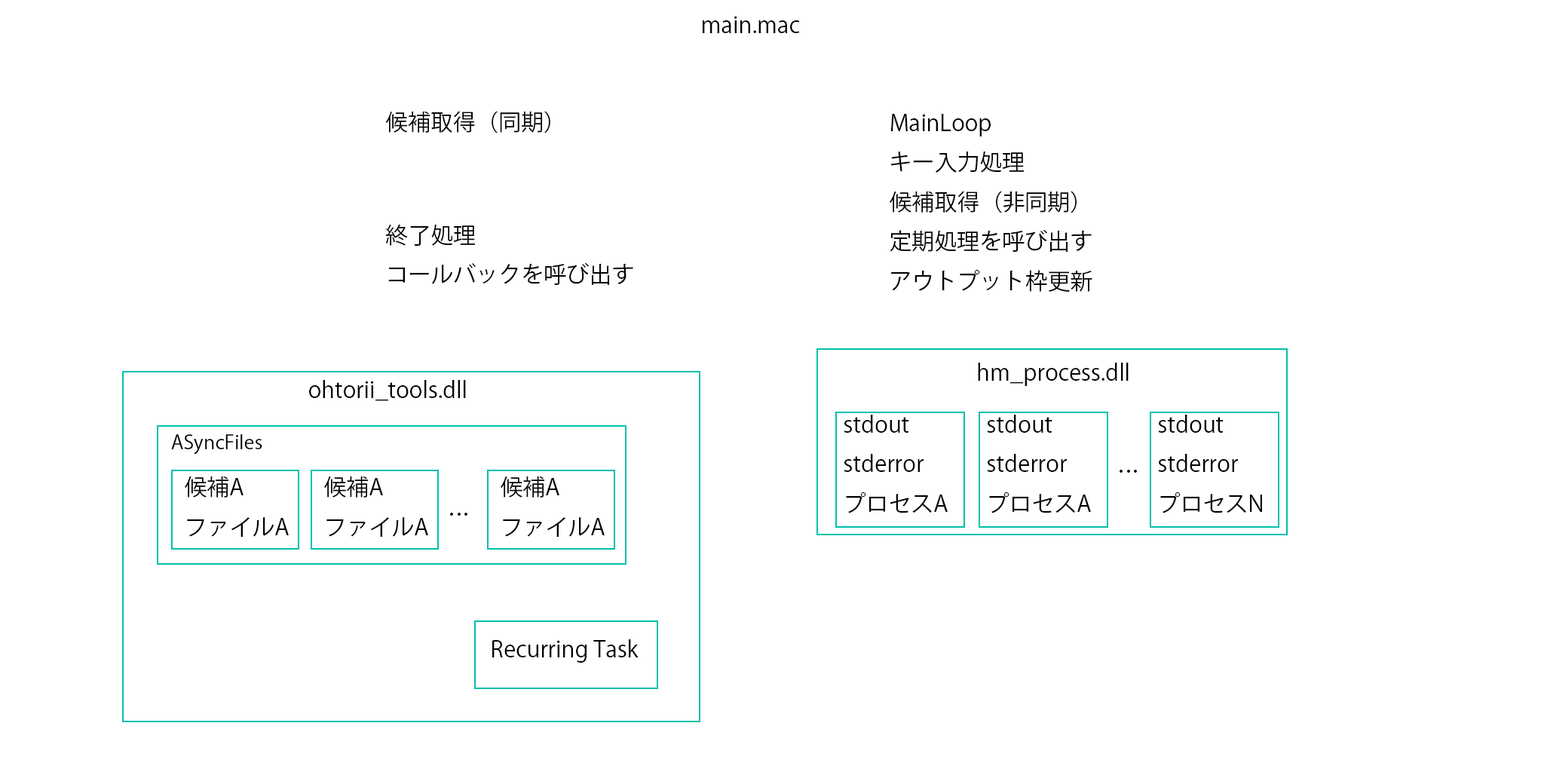
<style>
.page{position:relative;width:1544px;height:772px;background:#ffffff}
.page>*{position:absolute;margin:0}
.t1{font:22.6px "KozGoPr6N-Regular";color:#000000}
.t2{font:19.3px "KozGoPr6N-Regular";color:#000000}
</style>
<div class="page">
<p class="t1" style="left:703px;top:16px;width:97px;height:17px">main.mac</p>
<p class="t1" style="left:385px;top:111px;width:165px;height:22px">候補取得（同期）</p>
<p class="t1" style="left:890px;top:114px;width:203px;height:178px">MainLoop<br>キー入力処理<br>候補取得（非同期）<br>定期処理を呼び出す<br>アウトプット枠更新</p>
<p class="t1" style="left:386px;top:224px;width:247px;height:61px">終了処理<br>コールバックを呼び出す</p>
<p class="t1" style="left:978px;top:363px;width:151px;height:23px">hm_process.dll</p>
<p class="t1" style="left:309px;top:380px;width:157px;height:21px">ohtorii_tools.dll</p>
<p class="t1" style="left:844px;top:415px;width:104px;height:99px">stdout<br>stderror<br>プロセスA</p>
<p class="t1" style="left:987px;top:415px;width:104px;height:99px">stdout<br>stderror<br>プロセスA</p>
<p class="t1" style="left:1158px;top:415px;width:104px;height:99px">stdout<br>stderror<br>プロセスN</p>
<p class="t2" style="left:171px;top:434px;width:91px;height:21px">ASyncFiles</p>
<p class="t1" style="left:1120px;top:470px;width:17px;height:3px">…</p>
<p class="t1" style="left:185px;top:476px;width:104px;height:62px">候補A<br>ファイルA</p>
<p class="t1" style="left:324px;top:476px;width:104px;height:62px">候補A<br>ファイルA</p>
<p class="t1" style="left:501px;top:476px;width:104px;height:62px">候補A<br>ファイルA</p>
<p class="t1" style="left:450px;top:513px;width:18px;height:3px">…</p>
<p class="t1" style="left:492px;top:639px;width:147px;height:24px">Recurring Task</p>
</div>
